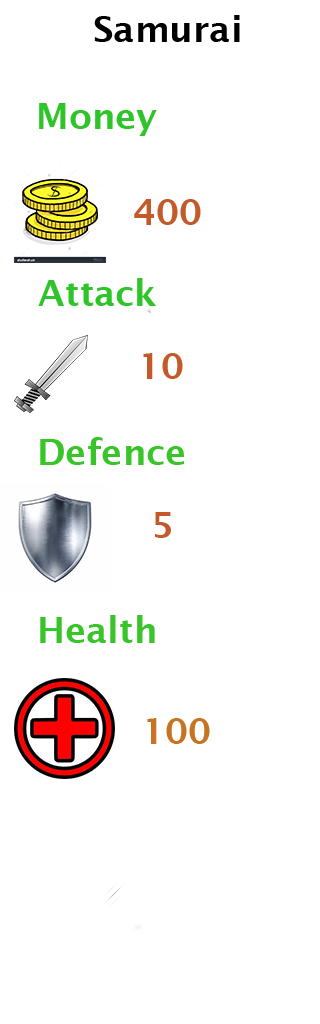
<style>
.page{position:relative;width:320px;height:1024px;background:#ffffff}
.page>*{position:absolute;margin:0}
.t1{font:36px "LucidaSans-Demi";color:#000000}
.t2{font:36px "LucidaSans-Demi";color:#2fc52a}
.t3{font:36px "LucidaSans-Demi";color:#c45a29}
.t4{font:36px "LucidaSans-Demi";color:#39c429}
.t5{font:36px "LucidaSans-Demi";color:#c77421}
</style>
<div class="page">
<p class="t1" style="left:94px;top:15px;width:146px;height:27px">Samurai</p>
<p class="t2" style="left:39px;top:103px;width:118px;height:33px">Money</p>
<p class="t3" style="left:134px;top:199px;width:67px;height:26px">400</p>
<p class="t2" style="left:38px;top:278px;width:118px;height:28px">Attack</p>
<p class="t3" style="left:143px;top:353px;width:40px;height:26px">10</p>
<p class="t4" style="left:40px;top:437px;width:144px;height:28px">Defence</p>
<p class="t3" style="left:155px;top:512px;width:16px;height:26px">5</p>
<p class="t4" style="left:40px;top:615px;width:115px;height:28px">Health</p>
<p class="t5" style="left:147px;top:718px;width:63px;height:26px">100</p>
</div>
